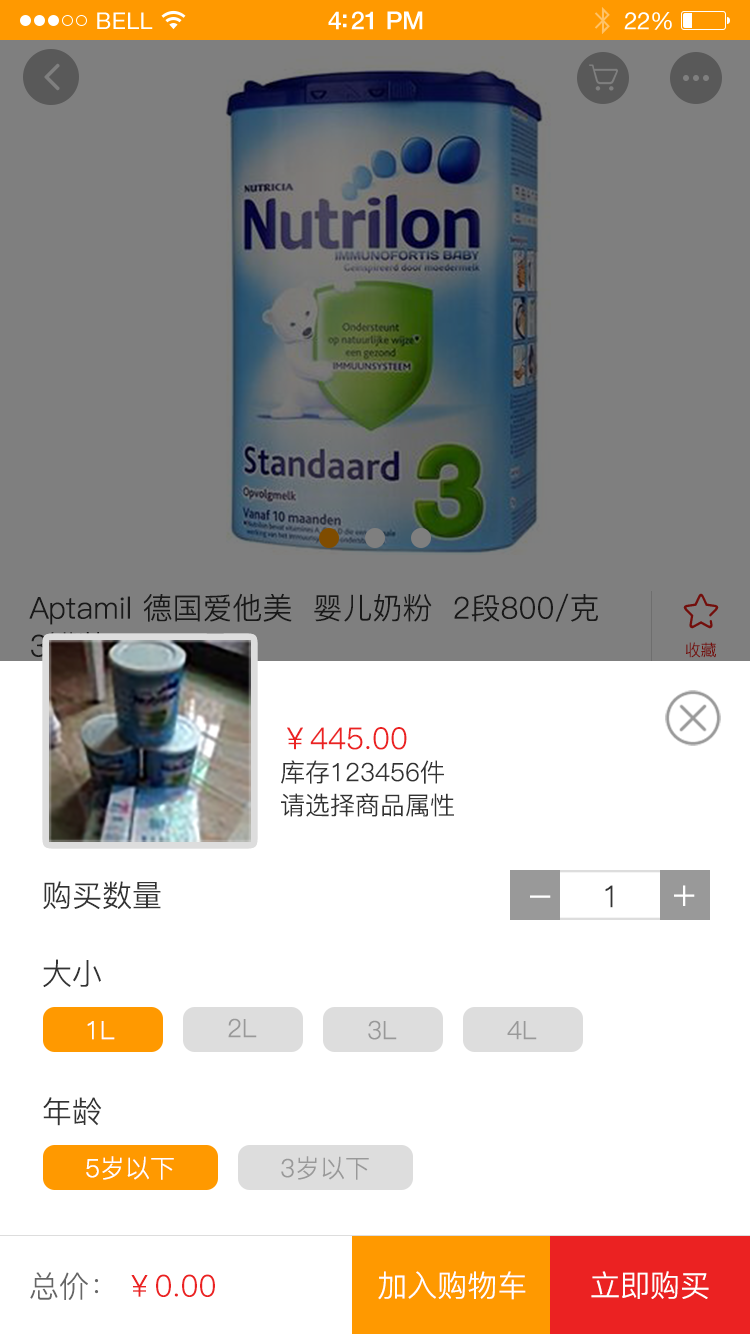
<style>
.page{position:relative;width:750px;height:1334px;background:#ffffff}
.page>*{position:absolute;margin:0}
.t1{font:23px "HelveticaNeue";letter-spacing:0.02em;color:#ffffff}
.t2{font:25px "HelveticaNeue-Medium";letter-spacing:-0.02em;color:#ffffff}
.t3{font:24px "HelveticaNeue";letter-spacing:-0.02em;color:#ffffff}
.t4{font:30px/37.9px "PingFang-SC-Regular";color:#191919}
.t5{font:16px "PingFang-SC-Regular";color:#730f0c}
.t6{font:30px "PingFang-SC-Regular";color:#eb2222}
.t7{font:25px "PingFang-SC-Regular";color:#333333}
.t8{font:30px "PingFang-SC-Regular";color:#333333}
.t9{font:40px "PingFang-SC-Regular";color:#ffffff}
.t10{font:25px "PingFang-SC-Regular";color:#ffffff}
.t11{font:25px "PingFang-SC-Regular";color:#999999}
.t12{font:30px "PingFang-SC-Regular";color:#666666}
.t13{font:30px "PingFang-SC-Regular";color:#ffffff}
</style>
<div class="page">
<p class="t1" style="left:97px;top:12px;width:56px;height:17px">BELL</p>
<p class="t2" style="left:328px;top:11px;width:95px;height:19px">4:21 PM</p>
<p class="t3" style="left:624px;top:12px;width:48px;height:18px">22%</p>
<p class="t4" style="left:29px;top:593px;width:569px;height:67px">Aptamil 德国爱他美  婴儿奶粉  2段800/克 <br>3罐装  6-10月</p>
<p class="t5" style="left:686px;top:642px;width:30px;height:16px">收藏</p>
<p class="t6" style="left:287px;top:727px;width:120px;height:23px">￥445.00</p>
<p class="t7" style="left:281px;top:760px;width:163px;height:24px">库存123456件</p>
<p class="t7" style="left:281px;top:793px;width:173px;height:24px">请选择商品属性</p>
<p class="t8" style="left:43px;top:881px;width:118px;height:28px">购买数量</p>
<p class="t8" style="left:605px;top:885px;width:8px;height:23px">1</p>
<p class="t9" style="left:674px;top:885px;width:21px;height:21px">+</p>
<p class="t9" style="left:530px;top:895px;width:21px;height:3px">-</p>
<p class="t8" style="left:43px;top:959px;width:58px;height:29px">大小</p>
<p class="t10" style="left:87px;top:1021px;width:28px;height:19px">1L</p>
<p class="t11" style="left:228px;top:1018px;width:29px;height:20px">2L</p>
<p class="t11" style="left:368px;top:1020px;width:29px;height:20px">3L</p>
<p class="t11" style="left:507px;top:1021px;width:30px;height:19px">4L</p>
<p class="t8" style="left:43px;top:1097px;width:59px;height:29px">年龄</p>
<p class="t10" style="left:86px;top:1156px;width:88px;height:24px">5岁以下</p>
<p class="t11" style="left:281px;top:1156px;width:88px;height:24px">3岁以下</p>
<p class="t12" style="left:30px;top:1272px;width:69px;height:28px">总价：</p>
<p class="t6" style="left:131px;top:1274px;width:84px;height:23px">￥0.00</p>
<p class="t13" style="left:378px;top:1271px;width:148px;height:29px">加入购物车</p>
<p class="t13" style="left:591px;top:1271px;width:118px;height:28px">立即购买</p>
</div>
